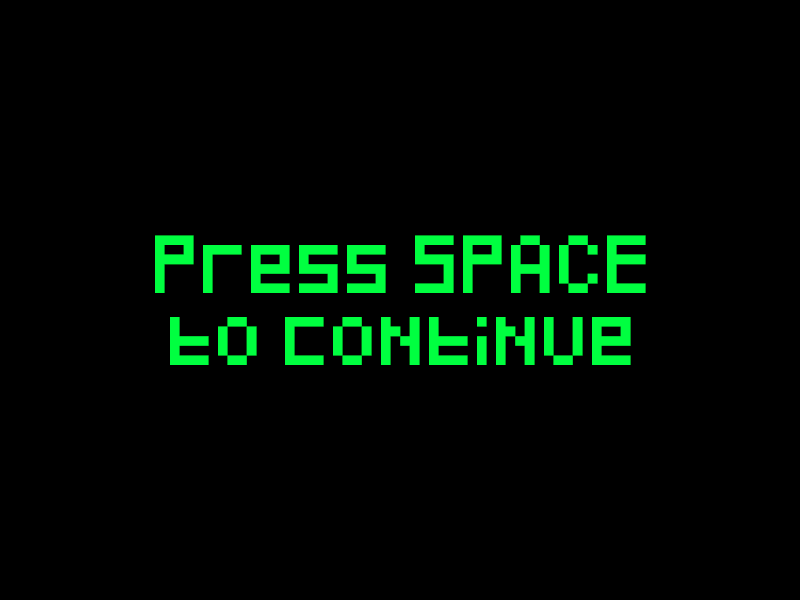
<style>
.page{position:relative;width:800px;height:600px;background:#000000}
.page>*{position:absolute;margin:0}
.t1{font:48px/72px "Pixeled";color:#00ff40}
</style>
<div class="page">
<p class="t1" style="left:155px;top:235px;width:491px;height:130px;text-align:center">Press SPACE<br>to continue</p>
</div>
